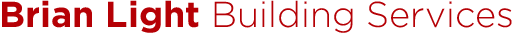
<style>
.page{position:relative;width:513px;height:33px;background:#ffffff}
.page>*{position:absolute;margin:0}
.t1{font:36px "Gotham-Light";color:#b50005}
.t2{font:36px "Gotham-Bold";color:#b50005}
</style>
<div class="page">
<p class="t1" style="left:2px;top:0px;width:510px;height:33px"><span class="t2">Brian Light </span>Building Services</p>
</div>
